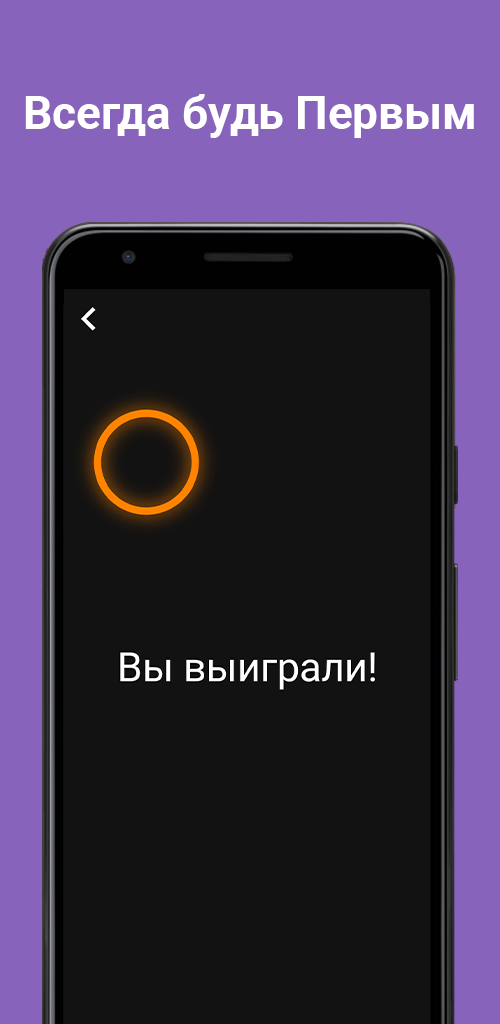
<style>
.page{position:relative;width:500px;height:1024px;background:#121212}
.page>*{position:absolute;margin:0}
.t1{font:45.8px "Roboto-Bold";color:#ffffff}
</style>
<div class="page">
<p class="t1" style="left:25px;top:94px;width:449px;height:44px">Всегда будь Первым</p>
</div>
